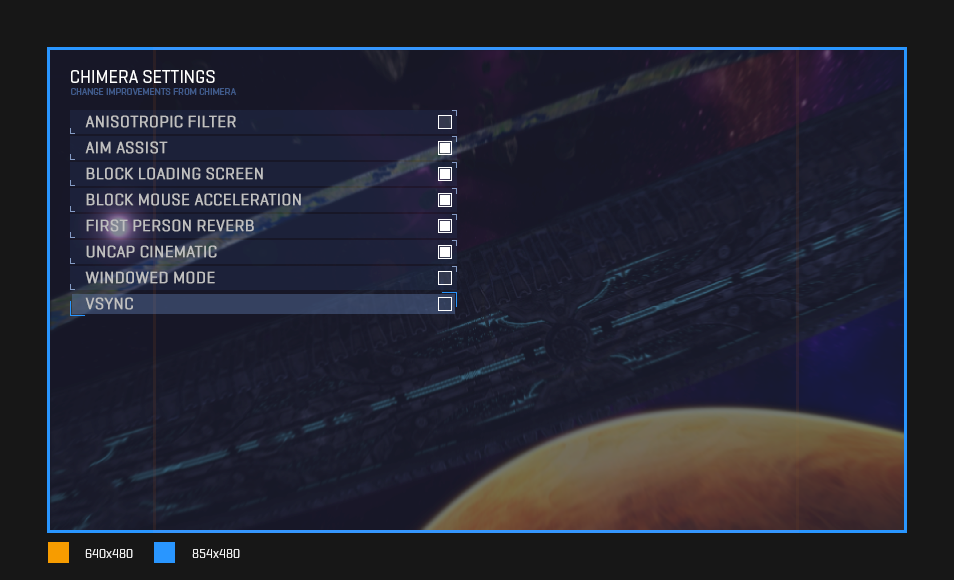
<style>
.page{position:relative;width:954px;height:580px;background:#171717}
.page>*{position:absolute;margin:0}
.t1{font:18.1px "Geogrotesque-Regular";color:#ffffff}
.t2{font:9.7px "Geogrotesque-Regular";color:#405a8b}
.t3{font:16.7px "Geogrotesque-Regular";color:#c0c0c0;font-weight:bold}
</style>
<div class="page">
<p class="t1" style="left:71px;top:70px;width:144px;height:13px">CHIMERA SETTINGS</p>
<p class="t2" style="left:71px;top:88px;width:165px;height:7px">CHANGE IMPROVEMENTS FROM CHIMERA</p>
<p class="t3" style="left:85px;top:115px;width:151px;height:13px">ANISOTROPIC FILTER</p>
<p class="t3" style="left:85px;top:141px;width:83px;height:13px">AIM ASSIST</p>
<p class="t3" style="left:86px;top:167px;width:177px;height:13px">BLOCK LOADING SCREEN</p>
<p class="t3" style="left:86px;top:193px;width:215px;height:13px">BLOCK MOUSE ACCELERATION</p>
<p class="t3" style="left:86px;top:219px;width:168px;height:13px">FIRST PERSON REVERB</p>
<p class="t3" style="left:86px;top:245px;width:131px;height:13px">UNCAP CINEMATIC</p>
<p class="t3" style="left:85px;top:271px;width:130px;height:13px">WINDOWED MODE</p>
<p class="t3" style="left:85px;top:297px;width:48px;height:13px">VSYNC</p>
</div>
